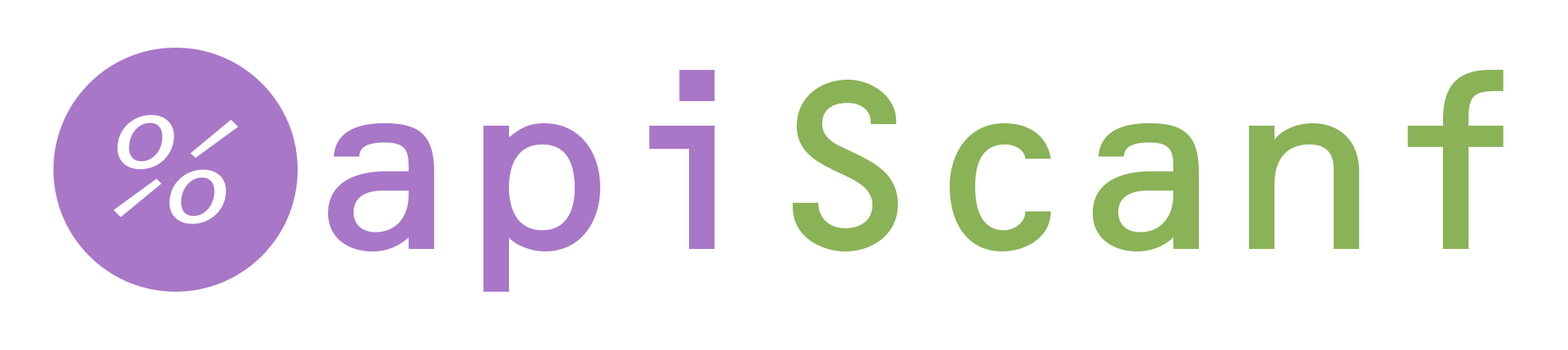
<style>
.page{position:relative;width:1568px;height:350px;background:#ffffff}
.page>*{position:absolute;margin:0}
.t1{font:246.7px "OCRBStd";letter-spacing:-0.1em;color:#8ab257}
.t2{font:246.7px "OCRBStd";letter-spacing:-0.1em;color:#a877c8}
.t3{font:164.4px "SourceCodePro-Regular";letter-spacing:-0.1em;color:#ffffff;scale:1.18 1}
</style>
<div class="page">
<p class="t1" style="left:328px;top:70px;width:1176px;height:222px"><span class="t2">api</span>Scanf</p>
<p class="t3" style="left:113px;top:115px;width:125px;height:109px">%</p>
</div>
